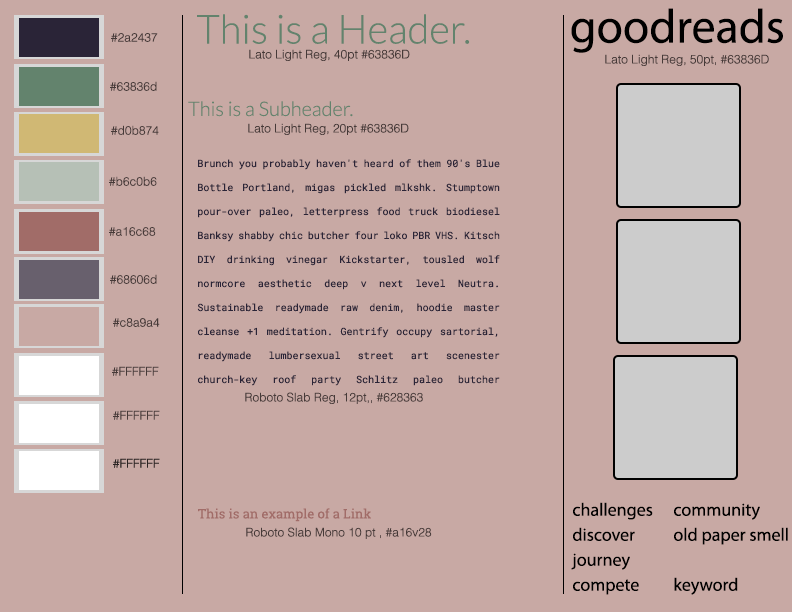
<style>
.page{position:relative;width:792px;height:612px;background:#c8a9a4}
.page>*{position:absolute;margin:0}
.t1{font:40px "Lato-Light";color:#63836d}
.t2{font:48px "MyriadPro-Regular";color:#000000}
.t3{font:12px "Helvetica-Light";color:#463a38}
.t4{font:20px "Lato-Light";color:#63836d}
.t5{font:10px/24px "RobotoMono-Regular";color:#2a2437}
.t6{font:13px "RobotoSlab-Regular";color:#a16c68}
.t7{font:18px "MyriadPro-Regular";color:#000000}
</style>
<div class="page">
<p class="t1" style="left:197px;top:14px;width:273px;height:30px">This is a Header.</p>
<p class="t2" style="left:571px;top:8px;width:212px;height:45px">goodreads</p>
<p class="t3" style="left:111px;top:33px;width:47px;height:9px">#2a2437</p>
<p class="t3" style="left:249px;top:49px;width:161px;height:12px">Lato Light Reg, 40pt #63836D</p>
<p class="t3" style="left:605px;top:54px;width:164px;height:12px">Lato Light Reg, 50pt, #63836D</p>
<p class="t3" style="left:110px;top:81px;width:47px;height:10px">#63836d</p>
<p class="t4" style="left:188px;top:101px;width:165px;height:16px">This is a Subheader.</p>
<p class="t3" style="left:111px;top:125px;width:48px;height:10px">#d0b874</p>
<p class="t3" style="left:248px;top:123px;width:161px;height:12px">Lato Light Reg, 20pt #63836D</p>
<p class="t5" style="left:197px;top:159px;width:303px;height:227px;text-align:justify">Brunch you probably haven't heard of them 90's Blue Bottle Portland, migas pickled mlkshk. Stumptown pour-over paleo, letterpress food truck biodiesel Banksy shabby chic butcher four loko PBR VHS. Kitsch DIY drinking vinegar Kickstarter, tousled wolf normcore aesthetic deep v next level Neutra. Sustainable readymade raw denim, hoodie master cleanse +1 meditation. Gentrify occupy sartorial, readymade lumbersexual street art scenester church-key roof party Schlitz paleo butcher asymmetrical. Whatever distillery bespoke letterpress keffiyeh pork belly. Ethical selvage letterpress Godard, you probably haven't heard of them distillery normcore 90's whatever.</p>
<p class="t3" style="left:109px;top:176px;width:48px;height:10px">#b6c0b6</p>
<p class="t3" style="left:109px;top:227px;width:47px;height:9px">#a16c68</p>
<p class="t3" style="left:110px;top:274px;width:47px;height:10px">#68606d</p>
<p class="t3" style="left:113px;top:318px;width:47px;height:9px">#c8a9a4</p>
<p class="t3" style="left:112px;top:366px;width:47px;height:10px">#FFFFFF</p>
<p class="t3" style="left:245px;top:392px;width:178px;height:12px">Roboto Slab Reg, 12pt,, #628363</p>
<p class="t3" style="left:113px;top:410px;width:47px;height:10px">#FFFFFF</p>
<p class="t6" style="left:198px;top:508px;width:173px;height:14px">This is an example of a Link</p>
<p class="t7" style="left:573px;top:502px;width:80px;height:18px">challenges</p>
<p class="t7" style="left:674px;top:503px;width:86px;height:17px">community</p>
<p class="t3" style="left:246px;top:527px;width:186px;height:12px">Roboto Slab Mono 10 pt , #a16v28</p>
<p class="t7" style="left:573px;top:527px;width:62px;height:14px">discover</p>
<p class="t7" style="left:674px;top:527px;width:114px;height:18px">old paper smell</p>
<p class="t7" style="left:571px;top:553px;width:59px;height:17px">journey</p>
<p class="t7" style="left:573px;top:579px;width:66px;height:16px">compete</p>
<p class="t7" style="left:674px;top:577px;width:64px;height:18px">keyword</p>
</div>
